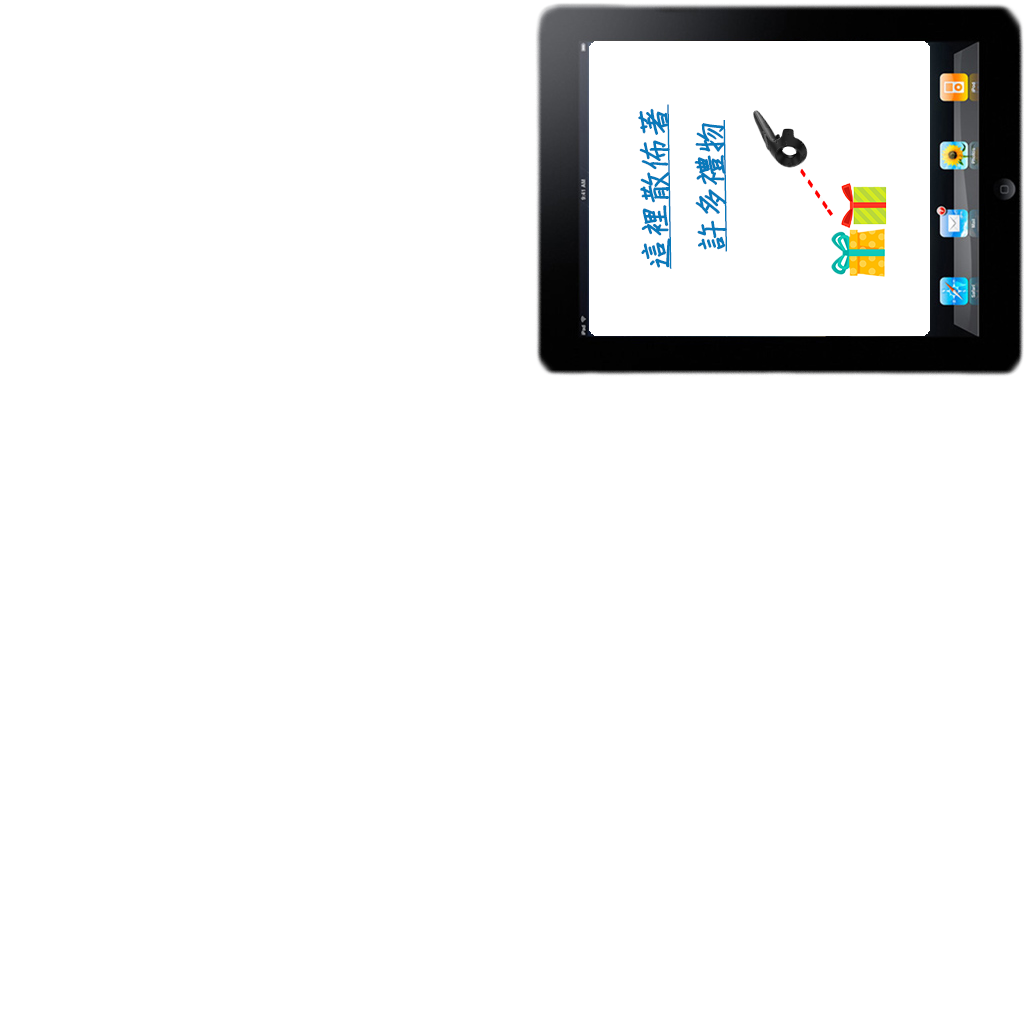
<style>
.page{position:relative;width:1024px;height:1024px;background:#ffffff}
.page>*{position:absolute;margin:0}
.t1{font:32px "DFChu-W4-WINP-BF";color:#0979ba;font-weight:bold;text-decoration:underline}
</style>
<div class="page">
<p class="t1" style="left:638px;top:104px;width:89px;height:165px;text-align:center;rotate:-91deg">這裡散佈著<br>許多禮物</p>
</div>
